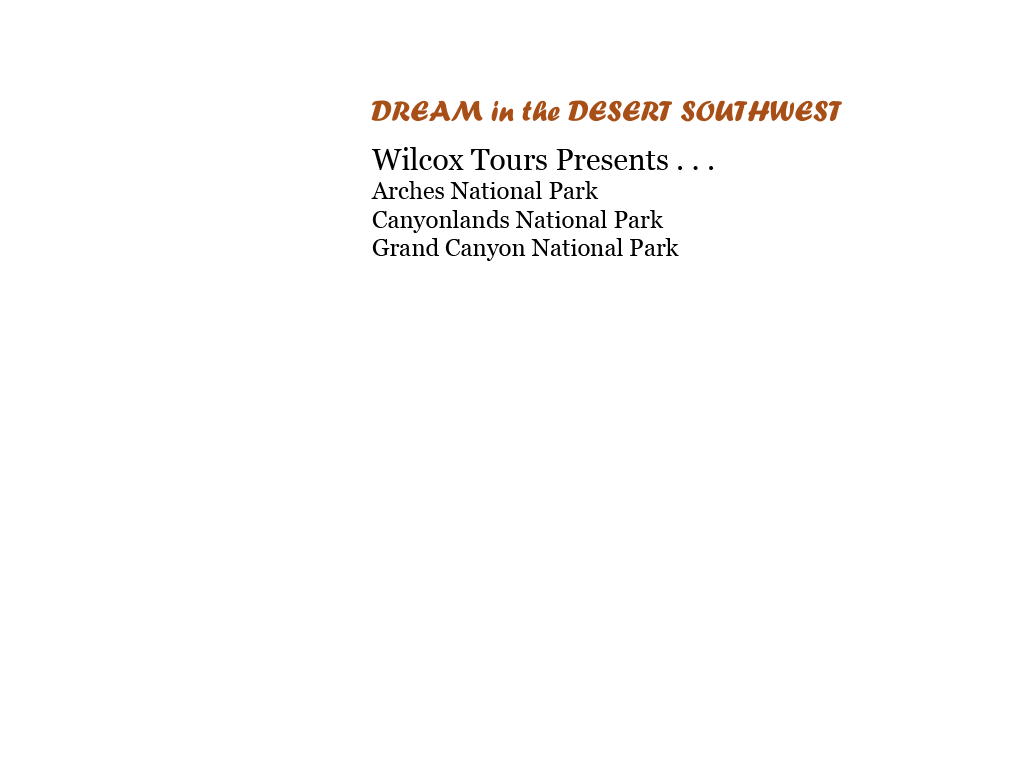
<style>
.page{position:relative;width:1024px;height:768px;background:#ffffff}
.page>*{position:absolute;margin:0}
.t1{font:24px "Georgia";color:#000000}
.t2{font:30px "Georgia";color:#000000}
</style>
<div class="page">
<p class="t1" style="left:371px;top:147px;width:343px;height:114px"><span class="t2">Wilcox Tours Presents . . .<br></span>Arches National Park<br>Canyonlands National Park<br>Grand Canyon National Park</p>
</div>
